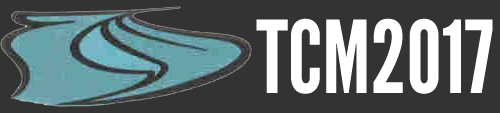
<style>
.page{position:relative;width:500px;height:113px;background:#333333}
.page>*{position:absolute;margin:0}
.t1{font:100px "LeagueGothic-Regular";color:#ffffff}
</style>
<div class="page">
<p class="t1" style="left:256px;top:18px;width:237px;height:76px">TCM2017</p>
</div>
